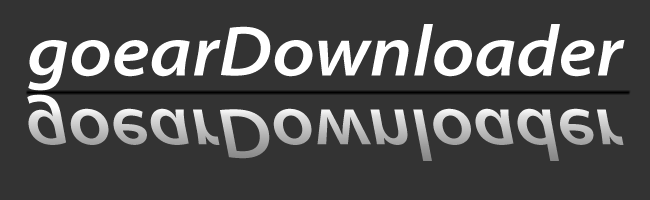
<style>
.page{position:relative;width:650px;height:200px;background:#333333}
.page>*{position:absolute;margin:0}
.t1{font:72px "MyriadPro-SemiboldSemiExtIt";color:#ffffff}
.t2{font:72px "MyriadPro-SemiboldSemiExtIt"}
</style>
<div class="page">
<p class="t1" style="left:28px;top:24px;width:597px;height:67px">goearDownloader</p>
<p class="t2" style="left:27px;top:94px;width:597px;height:67px">goearDownloader</p>
</div>
